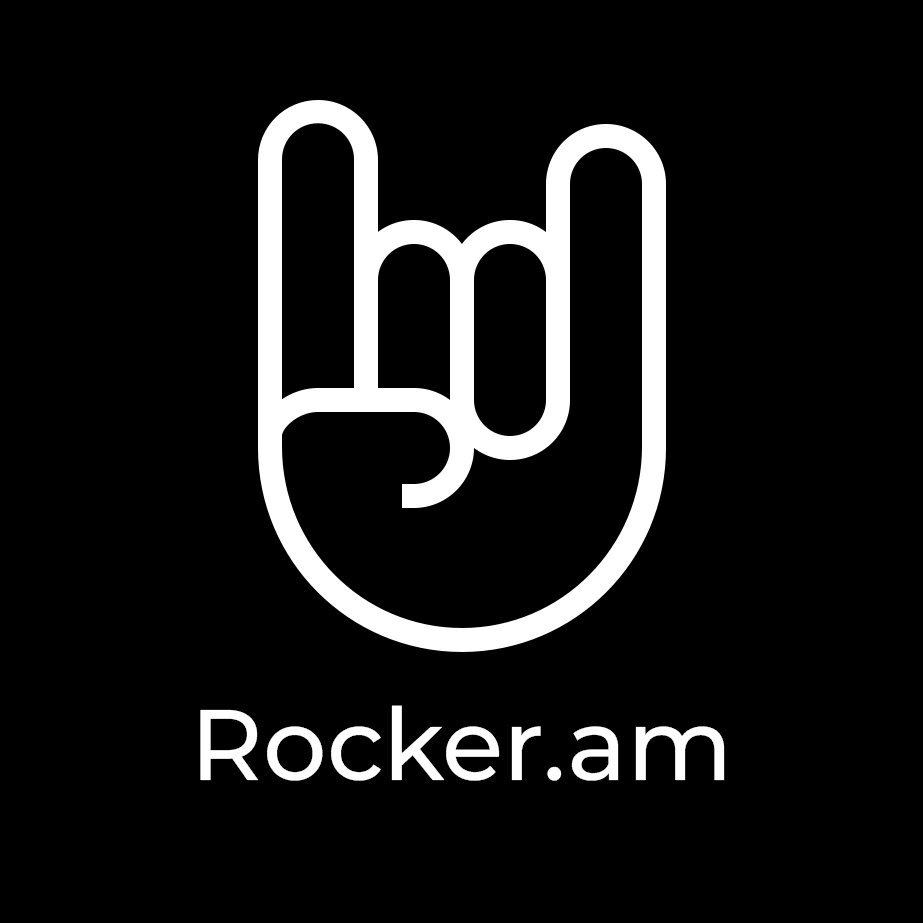
<style>
.page{position:relative;width:923px;height:923px;background:#000000}
.page>*{position:absolute;margin:0}
.t1{font:100px "Montserrat-Medium";color:#ffffff}
</style>
<div class="page">
<p class="t1" style="left:200px;top:705px;width:525px;height:76px">Rocker.am</p>
</div>
